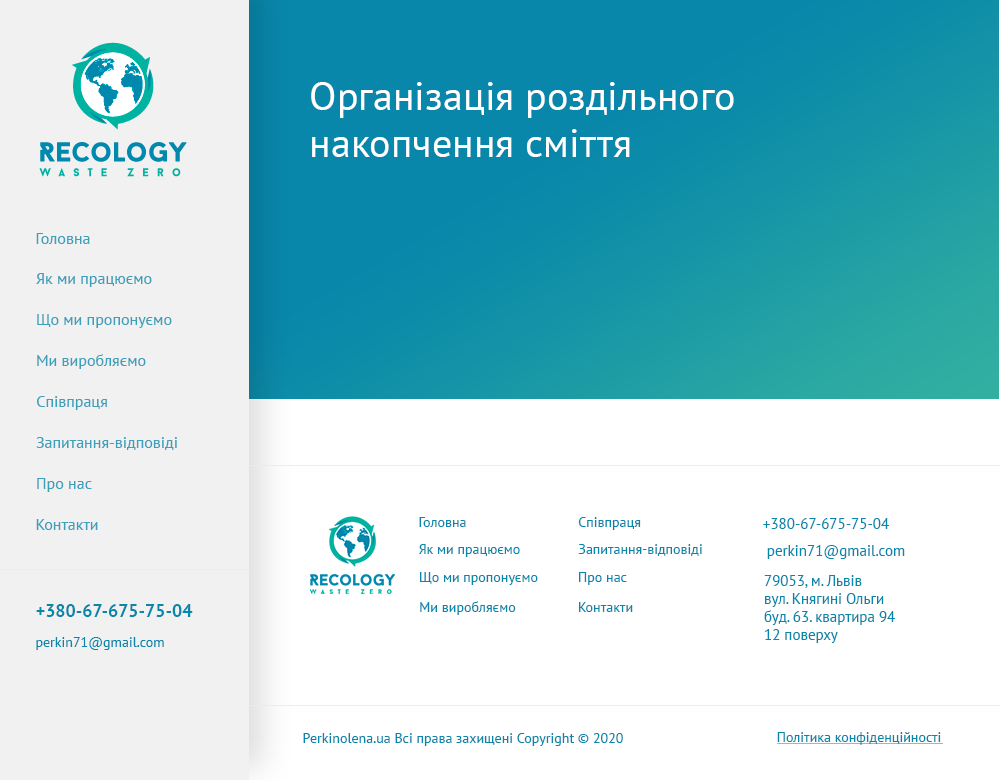
<style>
.page{position:relative;width:1000px;height:780px;background:#ffffff}
.page>*{position:absolute;margin:0}
.t1{font:40px "PTSans-Regular";color:#ffffff}
.t2{font:16px "PTSans-Regular";color:#3d9fba}
.t3{font:14px "PTSans-Regular";color:#0887aa}
.t4{font:15px "PTSans-Regular";color:#0887aa}
.t5{font:18px "PTSans-Bold";color:#0887aa}
</style>
<div class="page">
<p class="t1" style="left:311px;top:82px;width:423px;height:75px;text-align:right">Організація роздільного<br>накопчення сміття</p>
<p class="t2" style="left:36px;top:233px;width:54px;height:11px">Головна</p>
<p class="t2" style="left:36px;top:273px;width:116px;height:14px">Як ми працюємо</p>
<p class="t2" style="left:37px;top:314px;width:135px;height:14px">Що ми пропонуємо</p>
<p class="t2" style="left:37px;top:354px;width:109px;height:15px">Ми виробляємо</p>
<p class="t2" style="left:37px;top:396px;width:70px;height:14px">Співпраця</p>
<p class="t2" style="left:36px;top:437px;width:141px;height:13px">Запитання-відповіді</p>
<p class="t2" style="left:37px;top:478px;width:55px;height:14px">Про нас</p>
<p class="t2" style="left:36px;top:519px;width:62px;height:11px">Контакти</p>
<p class="t3" style="left:419px;top:517px;width:47px;height:10px">Головна</p>
<p class="t3" style="left:578px;top:517px;width:63px;height:13px">Співпраця</p>
<p class="t4" style="left:763px;top:518px;width:126px;height:11px">+380-67-675-75-04</p>
<p class="t3" style="left:419px;top:544px;width:101px;height:13px">Як ми працюємо</p>
<p class="t3" style="left:578px;top:544px;width:124px;height:12px">Запитання-відповіді</p>
<p class="t4" style="left:767px;top:545px;width:138px;height:14px">perkin71@gmail.com</p>
<p class="t3" style="left:420px;top:572px;width:118px;height:13px">Що ми пропонуємо</p>
<p class="t3" style="left:579px;top:572px;width:48px;height:13px">Про нас</p>
<p class="t4" style="left:764px;top:575px;width:131px;height:68px;text-align:right">79053, м. Львів<br>вул. Княгині Ольги <br>буд. 63. квартира 94<br>12 поверху</p>
<p class="t5" style="left:36px;top:604px;width:157px;height:13px">+380-67-675-75-04</p>
<p class="t3" style="left:420px;top:601px;width:96px;height:14px">Ми виробляємо</p>
<p class="t3" style="left:579px;top:602px;width:54px;height:10px">Контакти</p>
<p class="t3" style="left:36px;top:637px;width:128px;height:13px">perkin71@gmail.com</p>
<p class="t3" style="left:303px;top:733px;width:320px;height:13px">Perkinolena.ua Всі права захищені Copyright © 2020</p>
<p class="t3" style="left:777px;top:732px;width:164px;height:13px">Політика конфіденційності</p>
</div>
